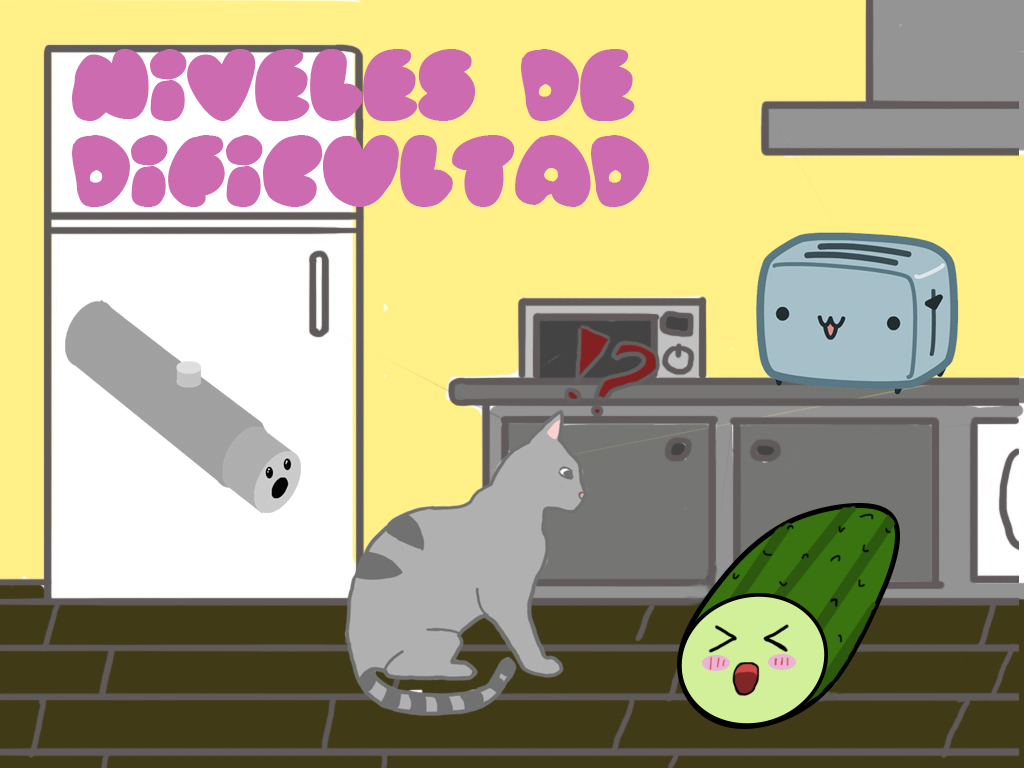
<style>
.page{position:relative;width:1024px;height:768px;background:#fff088}
.page>*{position:absolute;margin:0}
.t1{font:72px "Rubberneck";color:#cc6bb0}
</style>
<div class="page">
<p class="t1" style="left:72px;top:49px;width:577px;height:158px">niveles de dificultad</p>
</div>
